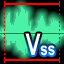
<style>
.page{position:relative;width:64px;height:64px;background:#4af2a7}
.page>*{position:absolute;margin:0}
.t1{font:18px "ArialNarrow-Bold";color:#ffffff;scale:0.9 1}
.t2{font:30px "ArialNarrow-Bold";color:#ffffff;scale:0.9 1}
</style>
<div class="page">
<p class="t1" style="left:25px;top:33px;width:30px;height:23px"><span class="t2">V</span>ss</p>
</div>
